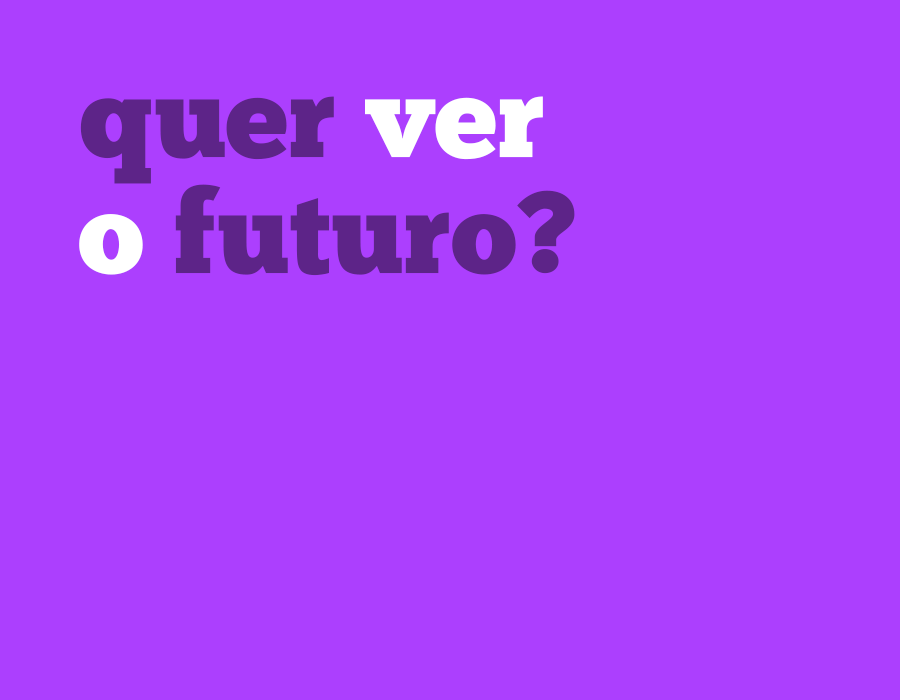
<style>
.page{position:relative;width:900px;height:700px;background:#ac3ffe}
.page>*{position:absolute;margin:0}
.t1{font:115.1px/116.3px "ChunkFive-Roman";color:#5d2488}
.t2{font:115.1px/116.3px "ChunkFive-Roman";color:#ffffff}
</style>
<div class="page">
<p class="t1" style="left:79px;top:96px;width:496px;height:180px">quer <span class="t2">ver<br>o </span>futuro?</p>
</div>
